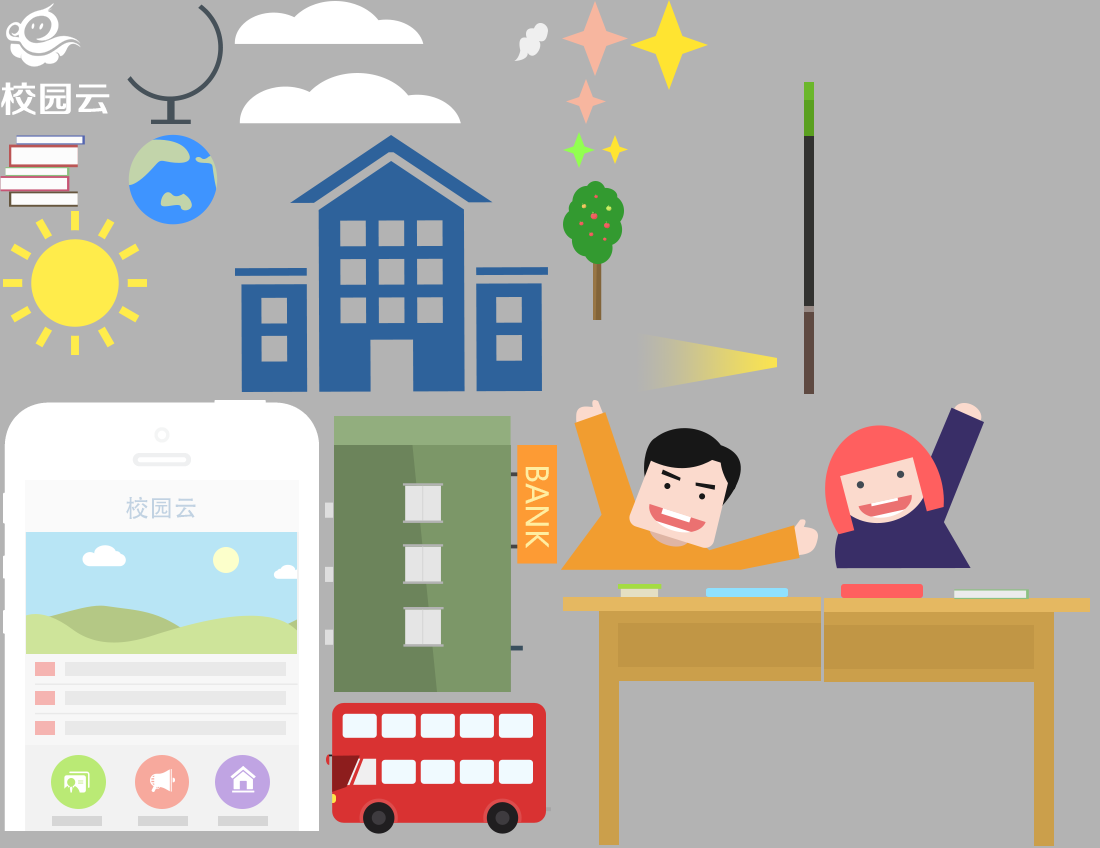
<style>
.page{position:relative;width:1100px;height:848px;background:#b3b3b3}
.page>*{position:absolute;margin:0}
.t1{font:35.6px "FZZZHUNHJW--GB1-0";color:#ffffff;font-weight:bold}
.t2{font:24.1px "AdobeHeitiStd-Regular";color:#c1d2e2}
</style>
<div class="page">
<p class="t1" style="left:1px;top:82px;width:109px;height:33px">校园云</p>
<p class="t2" style="left:126px;top:496px;width:70px;height:23px">校园云</p>
</div>
